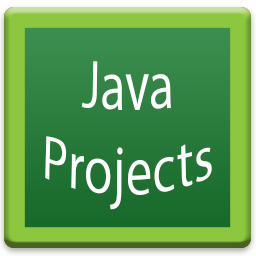
<style>
.page{position:relative;width:256px;height:256px}
.page>*{position:absolute;margin:0}
.t1{font:12px "MyriadPro-Regular";color:#ffffff}
</style>
<div class="page">
<p class="t1" style="left:45px;top:61px;width:167px;height:149px;text-align:center">Java<br>Projects</p>
</div>
